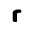
<style>
.page{position:relative;width:32px;height:32px;background:#ffffff}
.page>*{position:absolute;margin:0}
.t1{font:25px "Baloo-Regular";letter-spacing:0.02em;color:#000000}
</style>
<div class="page">
<p class="t1" style="left:12px;top:9px;width:10px;height:13px">r</p>
</div>
